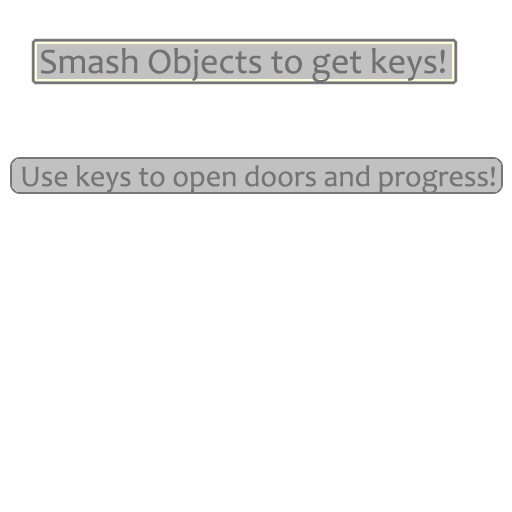
<style>
.page{position:relative;width:512px;height:512px;background:#ffffff}
.page>*{position:absolute;margin:0}
.t1{font:36px "Candara";color:#717171}
.t2{font:30px "Candara";color:#757575}
</style>
<div class="page">
<p class="t1" style="left:40px;top:48px;width:405px;height:35px">Smash Objects to get keys!</p>
<p class="t2" style="left:22px;top:165px;width:473px;height:29px">Use keys to open doors and progress!</p>
</div>
